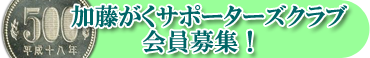
<style>
.page{position:relative;width:370px;height:58px;background:#99ff99}
.page>*{position:absolute;margin:0}
.t1{font:24px "HGPMinchoE";color:#006666}
</style>
<div class="page">
<p class="t1" style="left:71px;top:5px;width:276px;height:23px">加藤がくサポーターズクラブ</p>
<p class="t1" style="left:143px;top:30px;width:110px;height:23px">会員募集！</p>
</div>
